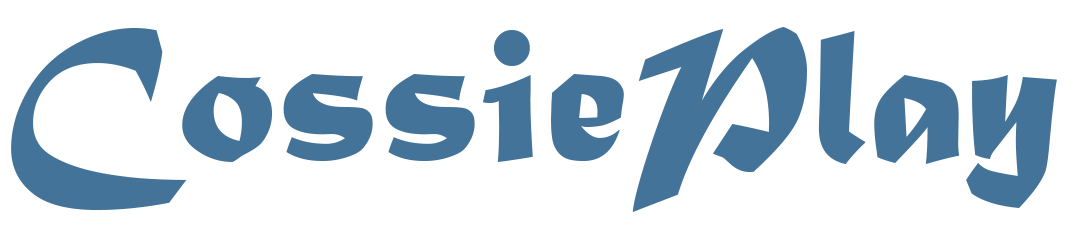
<style>
.page{position:relative;width:1080px;height:229px;background:#ffffff}
.page>*{position:absolute;margin:0}
.t1{font:200px "MaturaMTScriptCapitals";color:#437398}
</style>
<div class="page">
<p class="t1" style="left:11px;top:27px;width:1046px;height:185px">CossiePlay</p>
</div>
